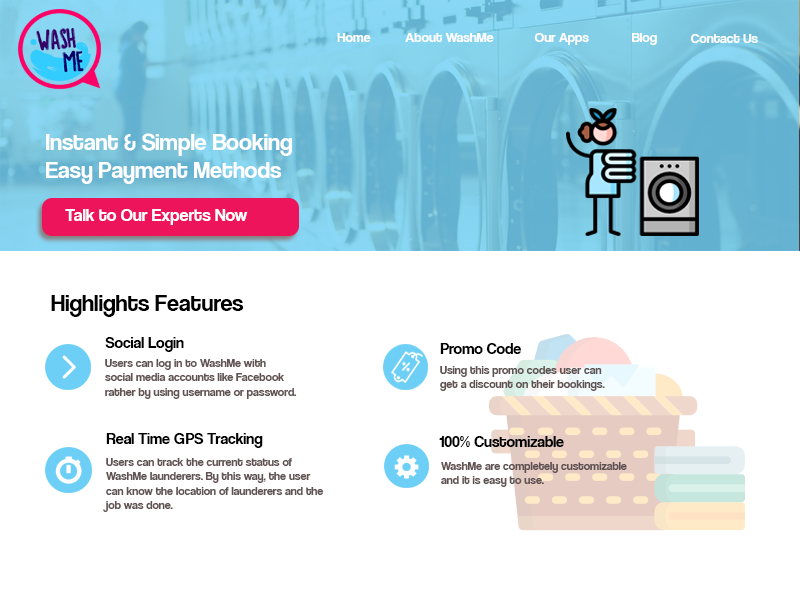
<style>
.page{position:relative;width:800px;height:600px;background:#ffffff}
.page>*{position:absolute;margin:0}
.t1{font:14px "CoolveticaRg-Regular";color:#ffffff}
.t2{font:24px "CoolveticaRg-Regular";color:#ffffff}
.t3{font:18px "CoolveticaRg-Regular";color:#ffffff}
.t4{font:24px "CoolveticaRg-Regular";color:#000000}
.t5{font:16px "CoolveticaRg-Regular";color:#000000}
.t6{font:12px "CoolveticaRg-Regular";color:#605252}
</style>
<div class="page">
<p class="t1" style="left:337px;top:33px;width:34px;height:9px">Home</p>
<p class="t1" style="left:405px;top:33px;width:89px;height:9px">About WashMe</p>
<p class="t1" style="left:534px;top:33px;width:55px;height:12px">Our Apps</p>
<p class="t1" style="left:632px;top:33px;width:25px;height:12px">Blog</p>
<p class="t1" style="left:690px;top:34px;width:68px;height:9px">Contact Us</p>
<p class="t2" style="left:46px;top:133px;width:246px;height:51px">Instant &amp; Simple Booking<br>Easy Payment Methods</p>
<p class="t3" style="left:65px;top:209px;width:183px;height:16px">Talk to Our Experts Now</p>
<p class="t4" style="left:51px;top:295px;width:193px;height:22px">Highlights Features</p>
<p class="t5" style="left:105px;top:337px;width:79px;height:15px">Social Login</p>
<p class="t5" style="left:440px;top:343px;width:81px;height:11px">Promo Code</p>
<p class="t6" style="left:105px;top:359px;width:192px;height:40px">Users can log in to WashMe with <br>social media accounts like Facebook <br>rather by using username or password.</p>
<p class="t6" style="left:440px;top:366px;width:165px;height:25px">Using this promo codes user can <br>get a discount on their bookings.</p>
<p class="t5" style="left:106px;top:433px;width:157px;height:15px">Real Time GPS Tracking</p>
<p class="t5" style="left:439px;top:436px;width:125px;height:11px">100% Customizable</p>
<p class="t6" style="left:103px;top:458px;width:221px;height:54px">Users can track the current status of <br>WashMe launderers. By this way, the user <br>can know the location of launderers and the <br>job was done.</p>
<p class="t6" style="left:441px;top:462px;width:186px;height:25px">WashMe are completely customizable <br>and it is easy to use.</p>
</div>
